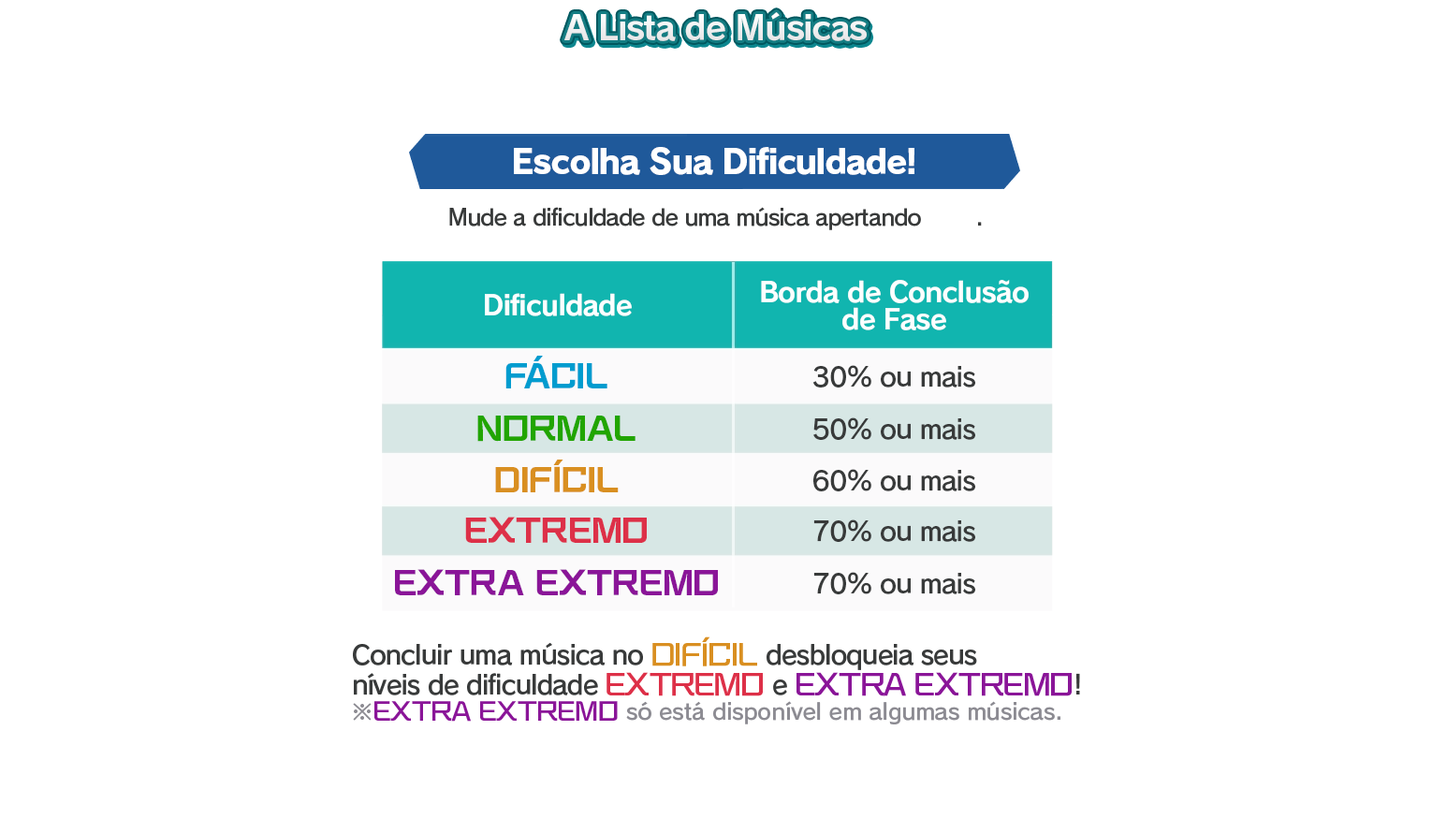
<style>
.page{position:relative;width:1432px;height:833px;background:#ffffff}
.page>*{position:absolute;margin:0}
.t1{font:33.7px "RodinPro-B";letter-spacing:-0.039em;color:#efeff0}
.t2{font:33.7px "RodinPro-EB";letter-spacing:-0.048em;color:#ffffff}
.t3{font:22.5px "RodinPro-DB";letter-spacing:-0.04em;color:#383a3a}
.t4{font:27.4px/26.5px "RodinPro-B";letter-spacing:-0.031em;color:#fbffff}
.t5{font:27.4px "RodinPro-B";letter-spacing:-0.031em;color:#fbffff}
.t6{font:28.7px "KafuTechnoStd-U";letter-spacing:0.011em;color:#009ccf}
.t7{font:26.2px "RodinPro-DB";letter-spacing:-0.034em;color:#383a3a}
.t8{font:28.7px "KafuTechnoStd-U";letter-spacing:0.011em;color:#21a500}
.t9{font:28.7px "KafuTechnoStd-U";letter-spacing:0.011em;color:#d98f21}
.t10{font:28.7px "KafuTechnoStd-U";letter-spacing:0.011em;color:#dd3048}
.t11{font:28.7px "KafuTechnoStd-U";letter-spacing:0.011em;color:#8a1598}
.t12{font:26.2px/29.9px "RodinPro-DB";letter-spacing:-0.04em;color:#383a3a}
.t13{font:26.2px/29.9px "KafuTechnoStd-E";letter-spacing:-0.04em;color:#d98f21}
.t14{font:26.2px/29.9px "KafuTechnoStd-E";letter-spacing:-0.04em;color:#dd3048}
.t15{font:26.2px/29.9px "KafuTechnoStd-E";letter-spacing:-0.04em;color:#8a1598}
.t16{font:22.5px "RodinPro-DB";letter-spacing:-0.014em;color:#8c8b92}
.t17{font:22.5px "KafuTechnoStd-E";letter-spacing:-0.014em;color:#8a1598}
</style>
<div class="page">
<p class="t1" style="left:564px;top:12px;width:303px;height:29px">A Lista de Músicas</p>
<p class="t2" style="left:514px;top:147px;width:400px;height:28px">Escolha Sua Dificuldade!</p>
<p class="t3" style="left:449px;top:207px;width:533px;height:23px">Mude a dificuldade de uma música apertando        .</p>
<p class="t4" style="left:761px;top:280px;width:267px;height:50px;text-align:center">Borda de Conclusão<br>de Fase</p>
<p class="t5" style="left:485px;top:293px;width:147px;height:23px">Dificuldade</p>
<p class="t6" style="left:505px;top:356px;width:102px;height:32px">FÁCIL</p>
<p class="t7" style="left:813px;top:365px;width:162px;height:22px">30% ou mais</p>
<p class="t8" style="left:477px;top:415px;width:158px;height:27px">NORMAL</p>
<p class="t7" style="left:813px;top:417px;width:162px;height:23px">50% ou mais</p>
<p class="t9" style="left:495px;top:459px;width:124px;height:33px">DIFÍCIL</p>
<p class="t7" style="left:813px;top:469px;width:162px;height:22px">60% ou mais</p>
<p class="t10" style="left:465px;top:517px;width:182px;height:26px">EXTREMO</p>
<p class="t7" style="left:813px;top:519px;width:162px;height:23px">70% ou mais</p>
<p class="t11" style="left:395px;top:569px;width:323px;height:26px">EXTRA EXTREMO</p>
<p class="t7" style="left:813px;top:572px;width:162px;height:22px">70% ou mais</p>
<p class="t12" style="left:353px;top:636px;width:727px;height:60px">Concluir uma música no <span class="t13">DIFÍCIL </span>desbloqueia seus<br>níveis de dificuldade <span class="t14">EXTREMO </span>e <span class="t15">EXTRA EXTREMO</span>!</p>
<p class="t16" style="left:353px;top:701px;width:707px;height:23px">※<span class="t17">EXTRA EXTREMO</span> só está disponível em algumas músicas.</p>
</div>
